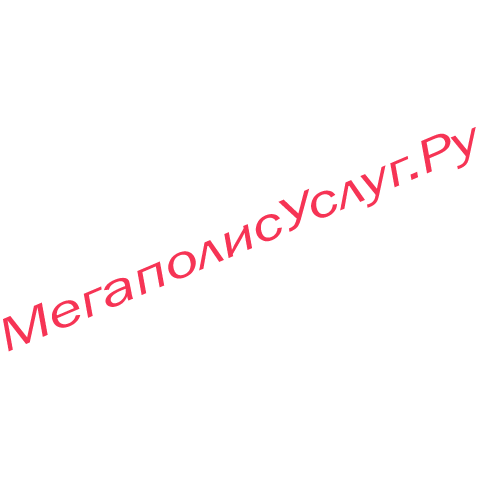
<style>
.page{position:relative;width:480px;height:480px;background:#ffffff}
.page>*{position:absolute;margin:0}
.t1{font:48px "FranklinGothic-BookItalic";letter-spacing:-0.005em;color:#f63455;scale:1.36 1}
</style>
<div class="page">
<p class="t1" style="left:3px;top:127px;width:473px;height:225px;rotate:-23deg">МегаполисУслуг.Ру</p>
</div>
